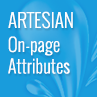
<style>
.page{position:relative;width:97px;height:97px;background:#199cdc}
.page>*{position:absolute;margin:0}
.t1{font:19px "Oswald-Light";color:#fefefe;text-transform:uppercase}
.t2{font:18px "Oswald-Light";color:#fefefe}
</style>
<div class="page">
<p class="t1" style="left:8px;top:11px;width:65px;height:18px">Artesian</p>
<p class="t2" style="left:8px;top:36px;width:62px;height:38px">On-page<br>Attributes</p>
</div>
